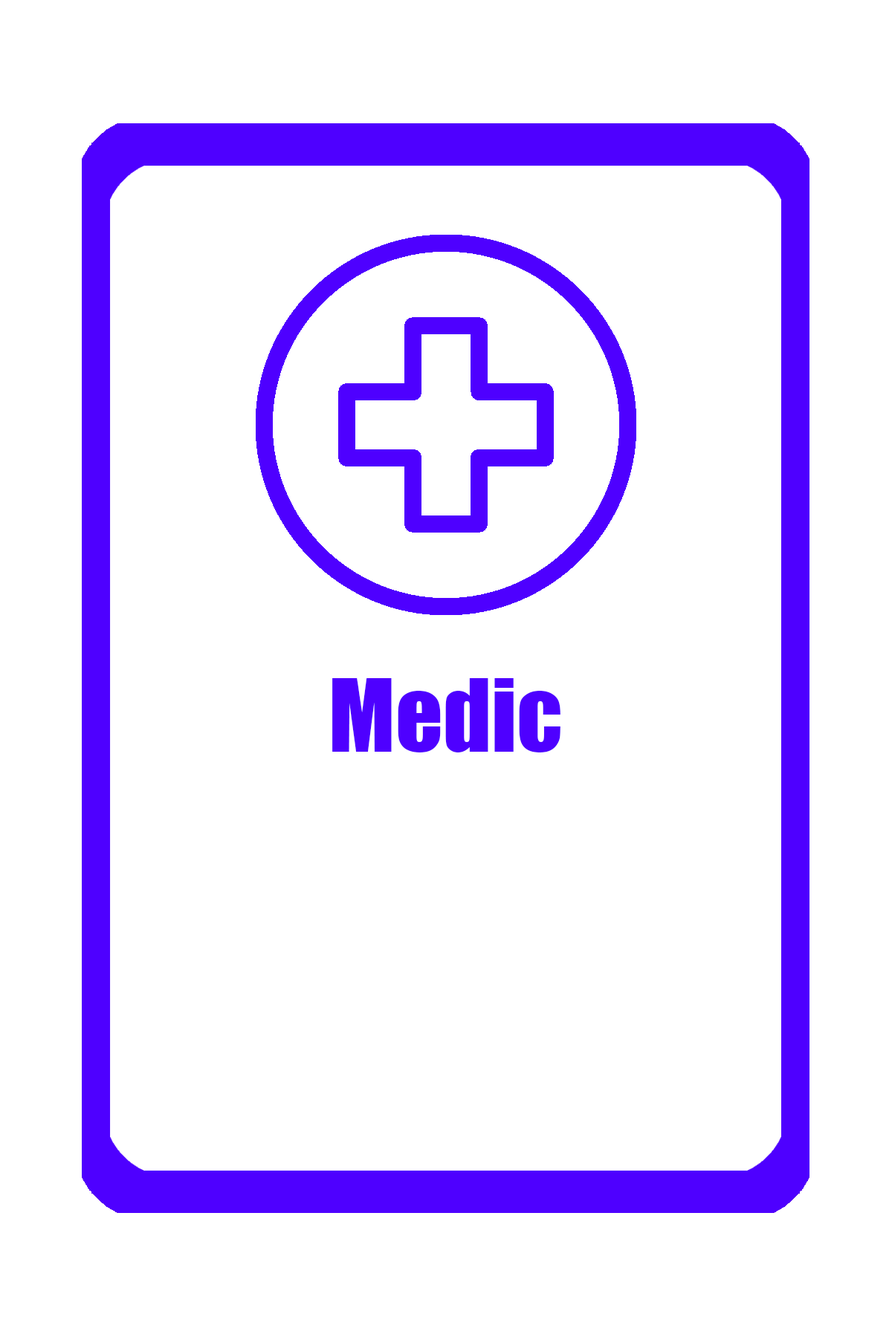
<style>
.page{position:relative;width:892px;height:1337px;background:#ffffff}
.page>*{position:absolute;margin:0}
.t1{font:92.9px "Impact";color:#4e00ff}
</style>
<div class="page">
<p class="t1" style="left:332px;top:678px;width:228px;height:75px">Medic</p>
</div>
